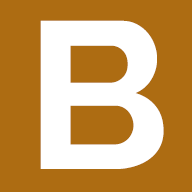
<style>
.page{position:relative;width:192px;height:192px;background:#ad6c12}
.page>*{position:absolute;margin:0}
.t1{font:208.4px "Raleway-Bold";color:#ffffff}
</style>
<div class="page">
<p class="t1" style="left:40px;top:20px;width:124px;height:149px">B</p>
</div>
